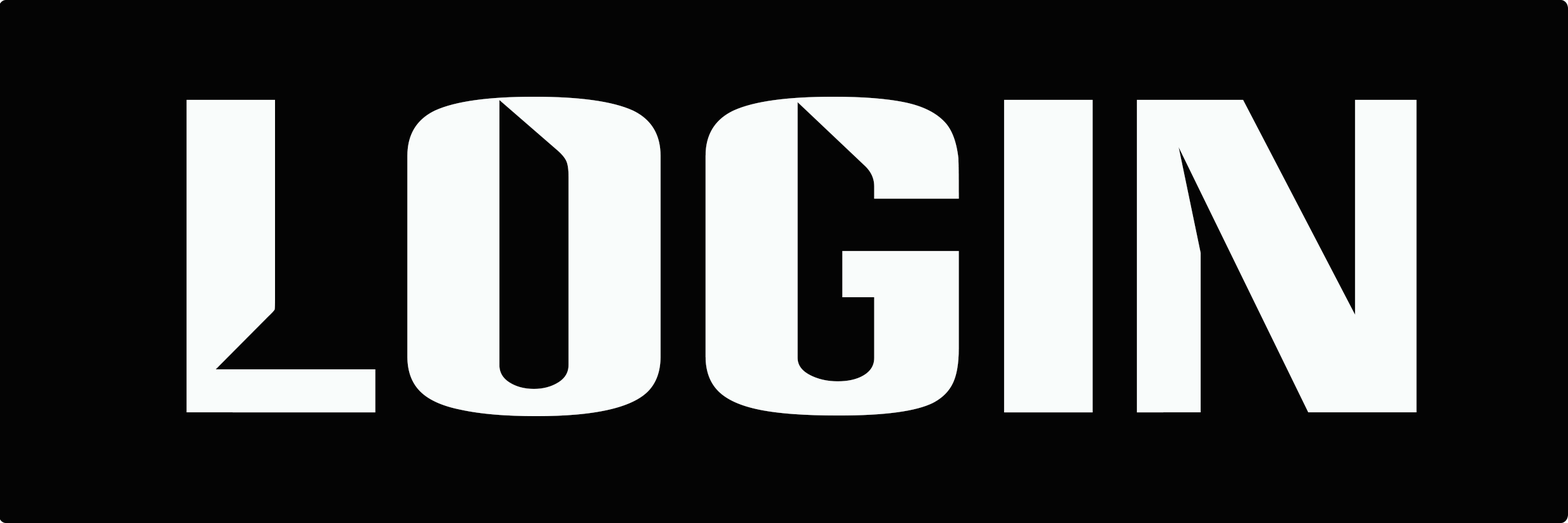
<style>
.page{position:relative;width:1568px;height:523px;background:#040404}
.page>*{position:absolute;margin:0}
.t1{font:427.3px "Anklepants";color:#f9fcfb;scale:0.92 1}
</style>
<div class="page">
<p class="t1" style="left:187px;top:96px;width:1230px;height:320px">LOGIN</p>
</div>
